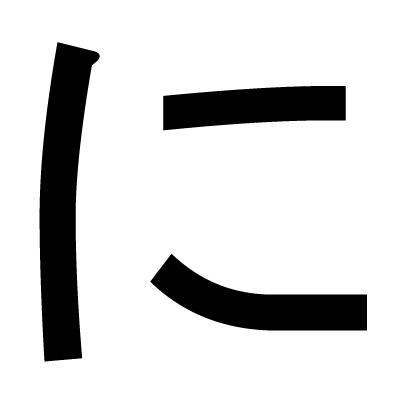
<style>
.page{position:relative;width:400px;height:400px;background:#ffffff}
.page>*{position:absolute;margin:0}
.t1{font:416.7px "MS-PGothic";color:#000000}
</style>
<div class="page">
<p class="t1" style="left:39px;top:42px;width:328px;height:320px">に</p>
</div>
